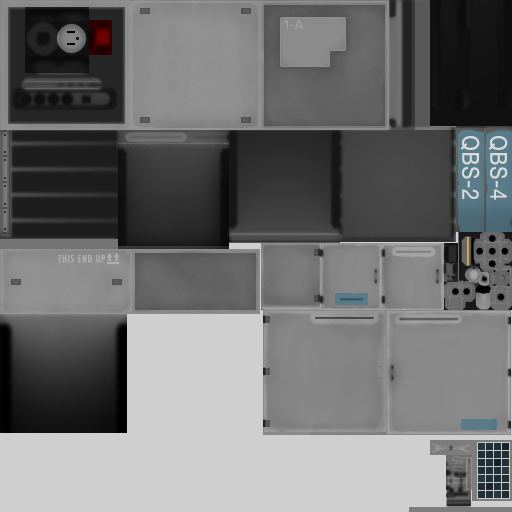
<style>
.page{position:relative;width:512px;height:512px;background:#cfcfcf}
.page>*{position:absolute;margin:0}
.t1{font:13.5px "WaukeganLDO-Bold";letter-spacing:0.075em;color:#a0a0a0}
.t2{font:23px "HelveticaNeue";letter-spacing:0.05em;color:#dadada;scale:0.87 1}
.t3{font:10px "Futura-CondensedMedium";letter-spacing:0.075em;color:#adadad}
</style>
<div class="page">
<p class="t1" style="left:283px;top:20px;width:20px;height:9px">1-A</p>
<p class="t2" style="left:460px;top:136px;width:20px;height:63px;rotate:90deg">QBS-2</p>
<p class="t2" style="left:488px;top:136px;width:20px;height:64px;rotate:90deg">QBS-4</p>
<p class="t3" style="left:58px;top:254px;width:47px;height:9px">THIS END UP</p>
</div>
